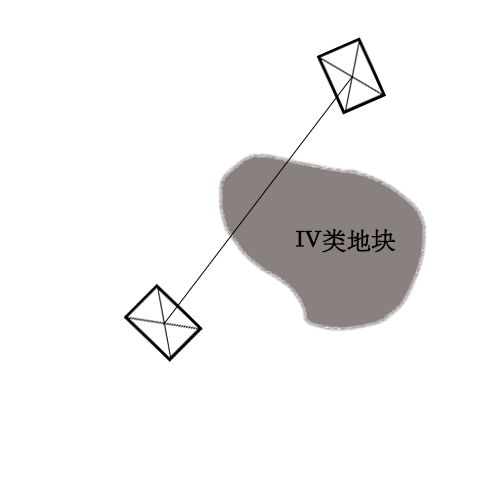
<style>
.page{position:relative;width:480px;height:480px;background:#ffffff}
.page>*{position:absolute;margin:0}
.t1{font:24px "STSong";color:#000000;font-weight:bold}
</style>
<div class="page">
<p class="t1" style="left:295px;top:228px;width:101px;height:25px">IV类地块</p>
</div>
